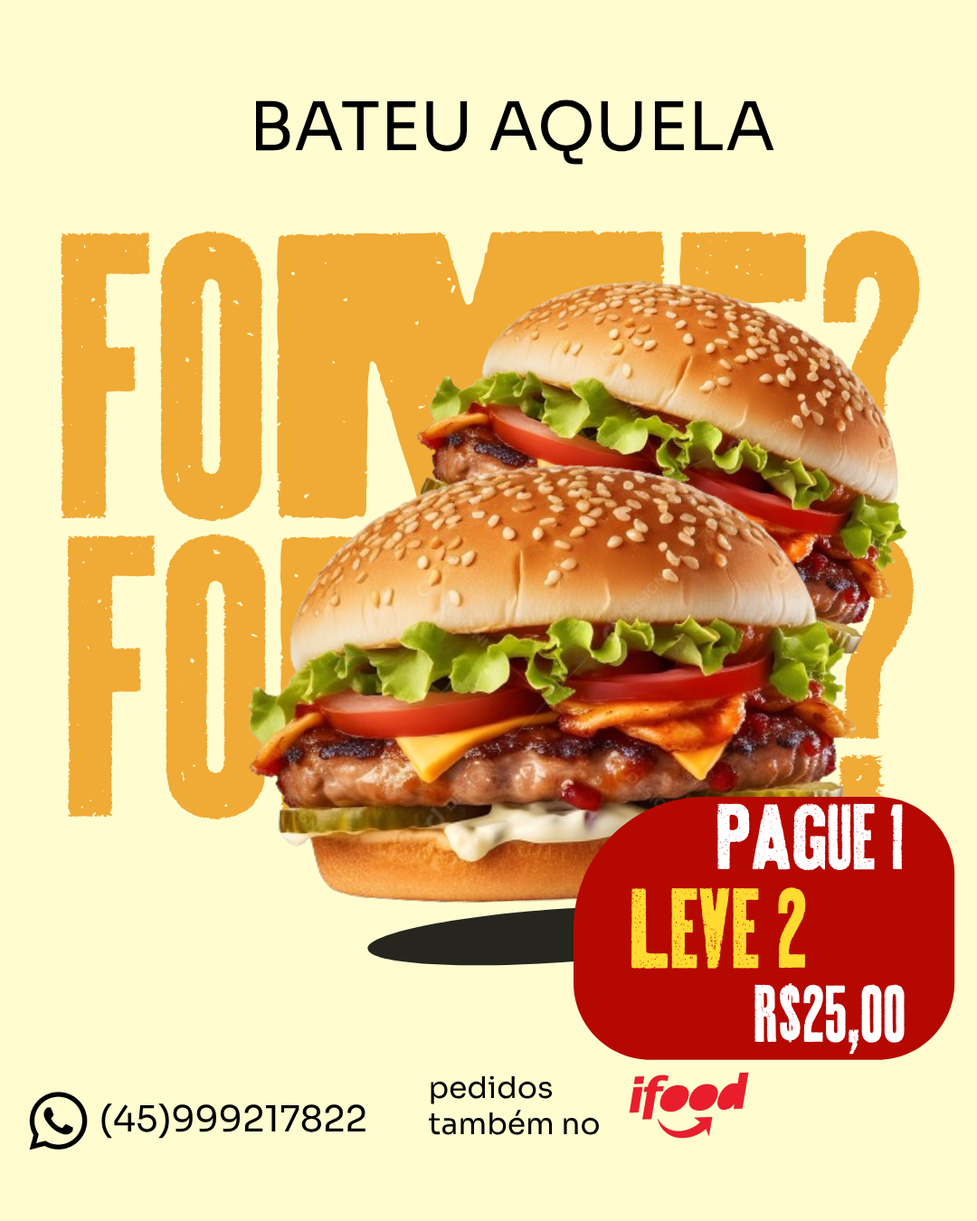
<style>
.page{position:relative;width:977px;height:1221px;background:#fffdd0}
.page>*{position:absolute;margin:0}
.t1{font:66.8px "Sora-Regular";color:#000000}
.t2{font:66.8px "Sora-Regular";color:#d73818}
.t3{font:424.3px "ThunderhousePro";color:#f0aa36}
.t4{font:418px "ThunderhousePro"}
.t5{font:98px "ThunderhousePro";color:#ffffff}
.t6{font:119.3px "ThunderhousePro";color:#ffda2f}
.t7{font:85.2px "ThunderhousePro";color:#ffffff}
.t8{font:29.7px "Sora-Regular";color:#000000}
.t9{font:35.8px "Sora-Regular";color:#000000}
.t10{font:35.8px "Sora-Regular";color:#d84408}
</style>
<div class="page">
<p class="t1" style="left:256px;top:99px;width:518px;height:66px"><span class="t2">B</span>ATEU AQUELA</p>
<p class="t3" style="left:60px;top:230px;width:861px;height:292px">FOME?</p>
<p class="t4" style="left:67px;top:533px;width:846px;height:286px">FOME?</p>
<p class="t5" style="left:717px;top:803px;width:186px;height:67px">pague 1</p>
<p class="t6" style="left:630px;top:887px;width:176px;height:82px">leve 2</p>
<p class="t7" style="left:754px;top:982px;width:150px;height:72px">R$25,00</p>
<p class="t8" style="left:429px;top:1075px;width:170px;height:60px">pedidos <br>também no</p>
<p class="t9" style="left:101px;top:1103px;width:264px;height:36px"><span class="t10">(</span>45)999217822</p>
</div>
